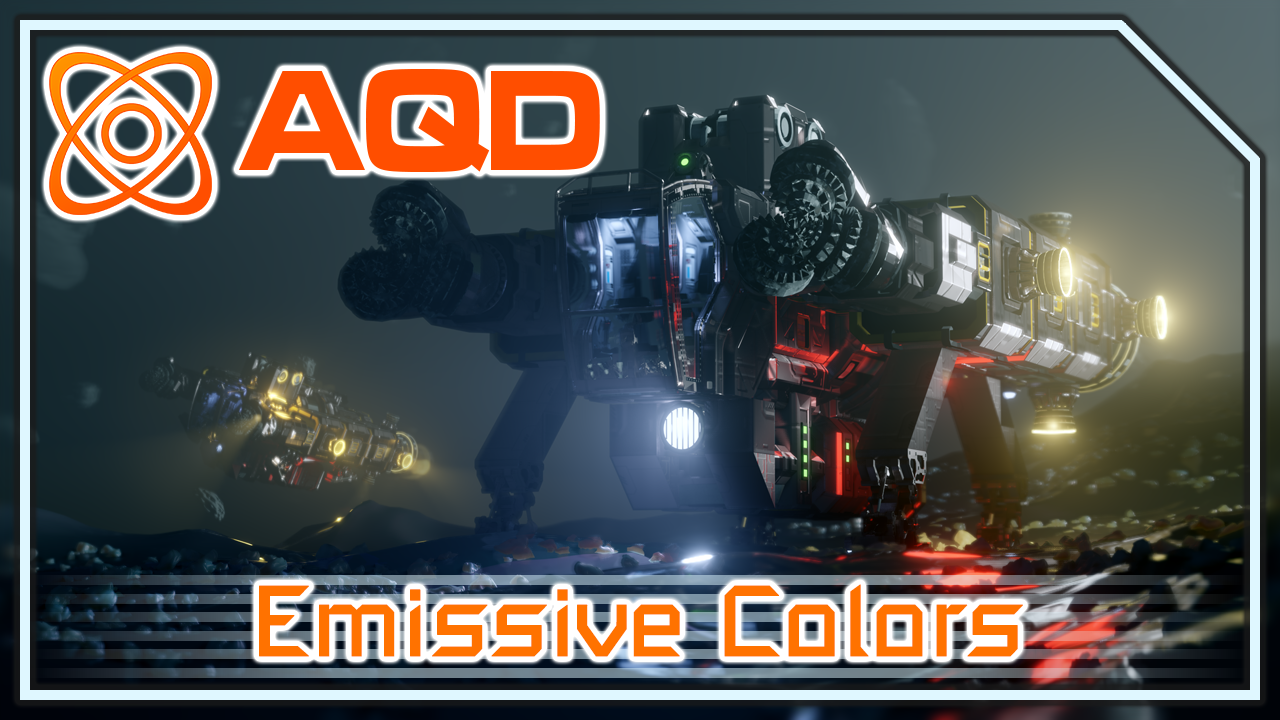
<style>
.page{position:relative;width:1280px;height:720px}
.page>*{position:absolute;margin:0}
.t1{font:148.7px "MicrogrammaD-BoldExte";color:#ff4e00;scale:0.83 1}
.t2{font:99px "SpaceEngineers";color:#ff7200;font-weight:bold}
</style>
<div class="page">
<p class="t1" style="left:238px;top:69px;width:362px;height:104px">AQD</p>
<p class="t2" style="left:259px;top:584px;width:764px;height:73px">Emissive Colors</p>
</div>
